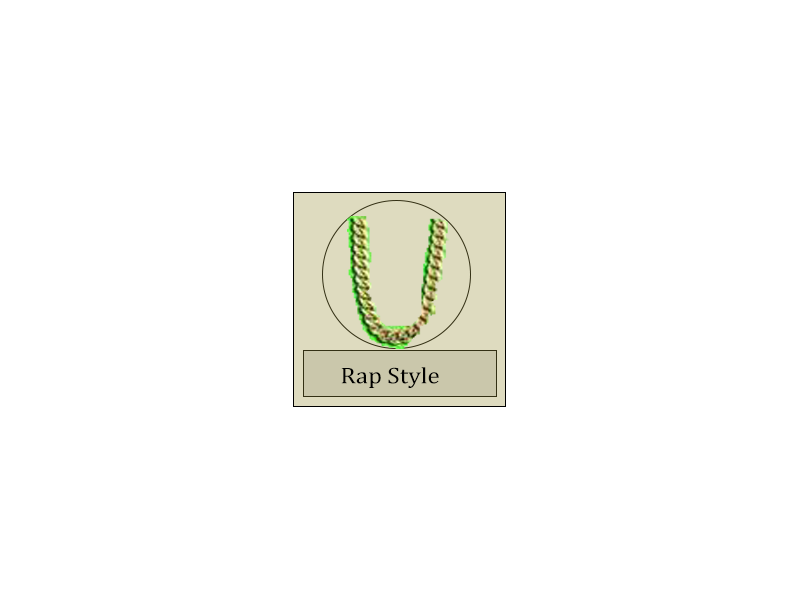
<style>
.page{position:relative;width:800px;height:600px;background:#ffffff}
.page>*{position:absolute;margin:0}
.t1{font:23px "CambriaMath";color:#000000;scale:1.09 1}
</style>
<div class="page">
<p class="t1" style="left:341px;top:367px;width:98px;height:21px">Rap Style</p>
</div>
